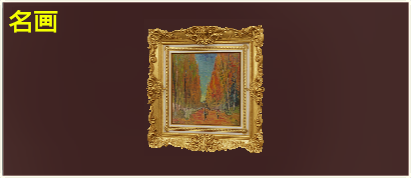
<style>
.page{position:relative;width:411px;height:178px}
.page>*{position:absolute;margin:0}
.t1{font:24px "MicrosoftYaHeiUI";color:#f4ff00;font-weight:bold}
</style>
<div class="page">
<p class="t1" style="left:9px;top:10px;width:49px;height:23px">名画</p>
</div>
